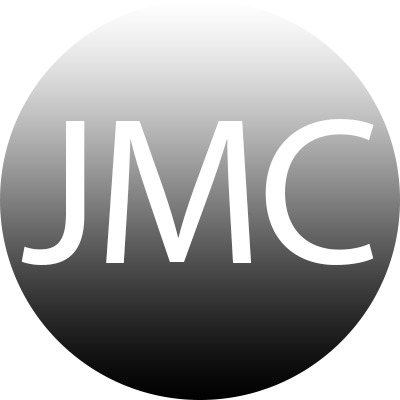
<style>
.page{position:relative;width:400px;height:400px;background:#ffffff}
.page>*{position:absolute;margin:0}
.t1{font:210.4px "MyriadPro-Regular";color:#ffffff}
</style>
<div class="page">
<p class="t1" style="left:21px;top:119px;width:353px;height:146px">JMC</p>
</div>
